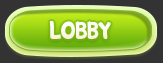
<style>
.page{position:relative;width:163px;height:63px;background:#333333}
.page>*{position:absolute;margin:0}
.t1{font:25px "Cartwheel";color:#ffffff}
</style>
<div class="page">
<p class="t1" style="left:49px;top:21px;width:62px;height:18px">lobby</p>
</div>
